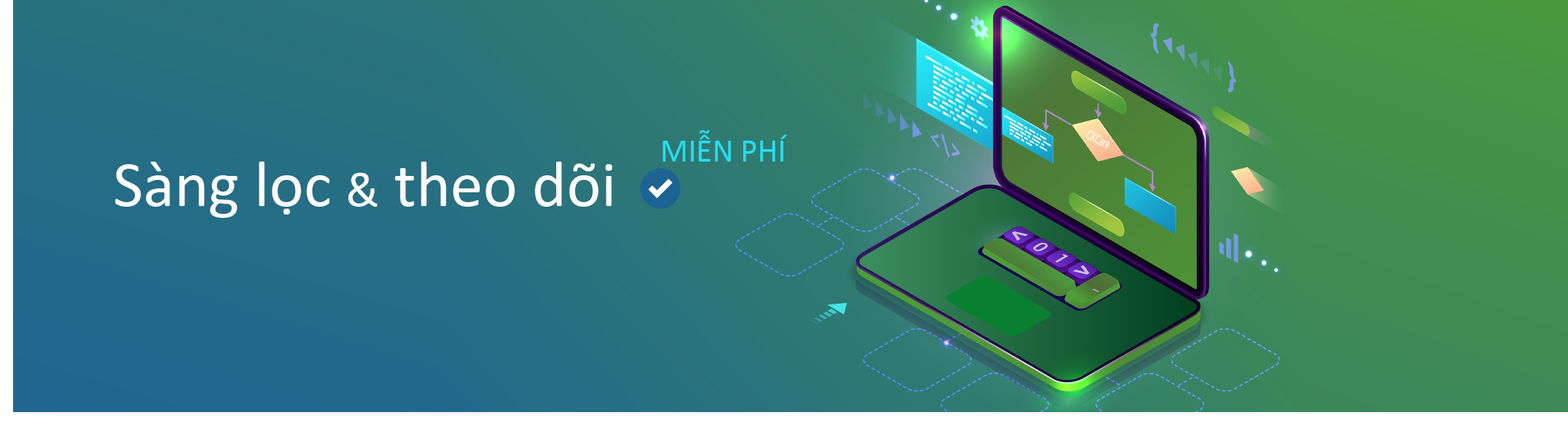
<style>
.page{position:relative;width:1568px;height:435px}
.page>*{position:absolute;margin:0}
.t1{font:32.7px "Calibri";color:#25ddef}
.t2{font:65.4px "Calibri";color:#ffffff}
.t3{font:49px "Calibri";color:#ffffff}
</style>
<div class="page">
<p class="t1" style="left:663px;top:130px;width:124px;height:31px">MIỄN PHÍ</p>
<p class="t2" style="left:115px;top:161px;width:497px;height:57px">Sàng lọc <span class="t3">&amp;</span> theo dõi</p>
</div>
